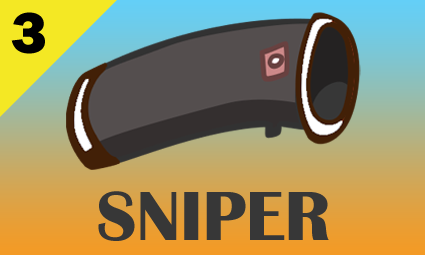
<style>
.page{position:relative;width:425px;height:255px}
.page>*{position:absolute;margin:0}
.t1{font:60px "FranklinGothic-Heavy";color:#000000}
.t2{font:72px "BritannicBold";color:#373737}
</style>
<div class="page">
<p class="t1" style="left:11px;top:12px;width:34px;height:42px">3</p>
<p class="t2" style="left:98px;top:191px;width:231px;height:50px">SNIPER</p>
</div>
